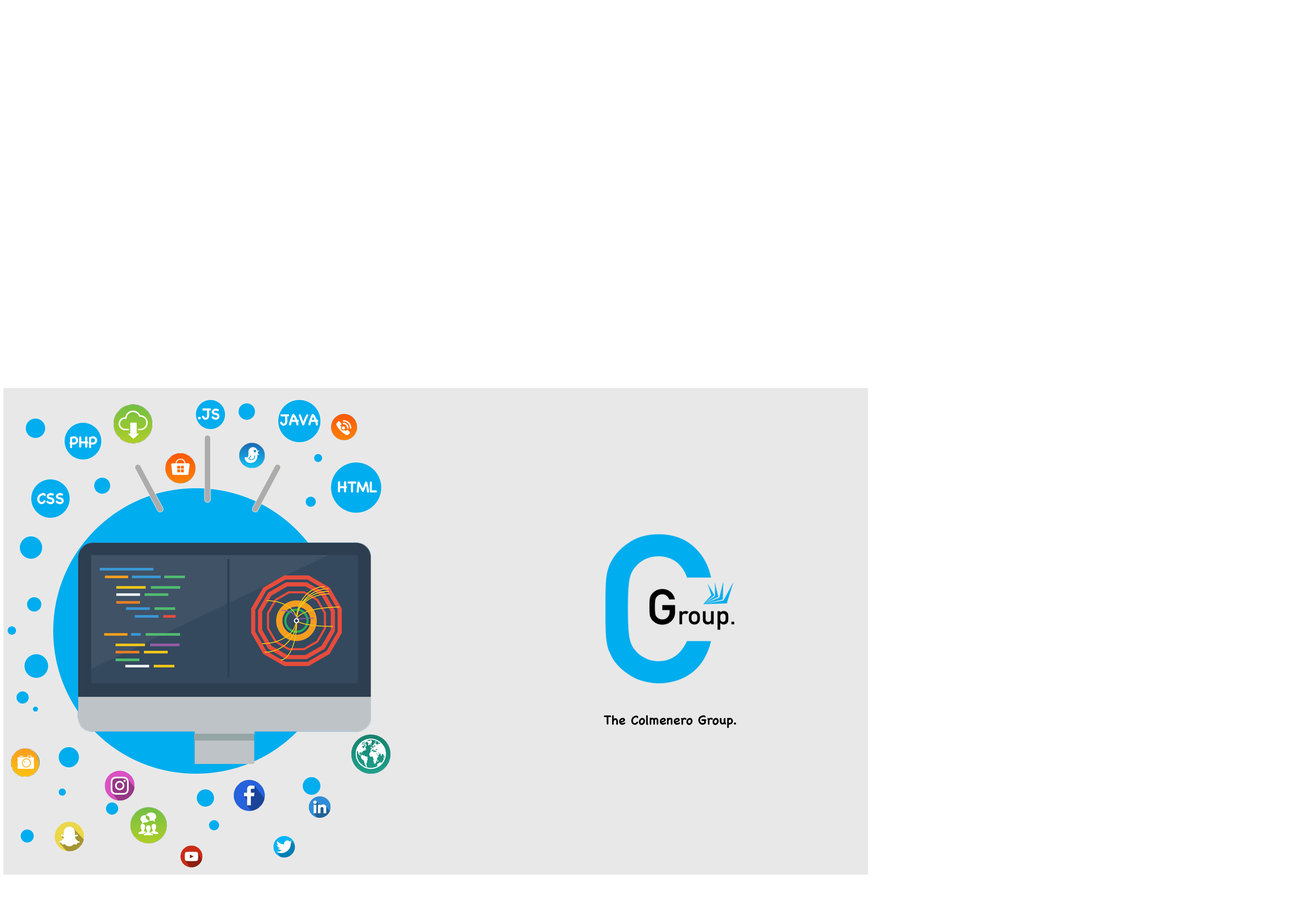
<style>
.page{position:relative;width:1297px;height:919px;background:#ffffff}
.page>*{position:absolute;margin:0}
.t1{font:15.2px "Chalkboard-Bold";color:#fcfcfc}
.t2{font:12.8px "Chalkboard-Bold";color:#000000}
</style>
<div class="page">
<p class="t1" style="left:198px;top:408px;width:22px;height:12px">.JS</p>
<p class="t1" style="left:280px;top:414px;width:38px;height:12px">JAVA</p>
<p class="t1" style="left:69px;top:436px;width:28px;height:12px">PHP</p>
<p class="t1" style="left:338px;top:481px;width:39px;height:12px">HTML</p>
<p class="t1" style="left:37px;top:493px;width:27px;height:11px">CSS</p>
<p class="t2" style="left:604px;top:715px;width:133px;height:13px">The Colmenero Group.</p>
</div>
